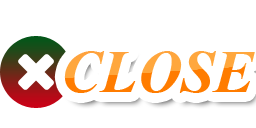
<style>
.page{position:relative;width:256px;height:128px;background:#ffffff}
.page>*{position:absolute;margin:0}
.t1{font:60px "TimesNewRomanPS-BoldItalicMT"}
</style>
<div class="page">
<p class="t1" style="left:64px;top:51px;width:191px;height:42px">CLOSE</p>
</div>
